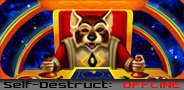
<style>
.page{position:relative;width:184px;height:90px}
.page>*{position:absolute;margin:0}
.t1{font:10px "AeromaticsSmallCapsNC";color:#000000}
</style>
<div class="page">
<p class="t1" style="left:3px;top:81px;width:109px;height:7px">Self-Destruct:</p>
</div>
